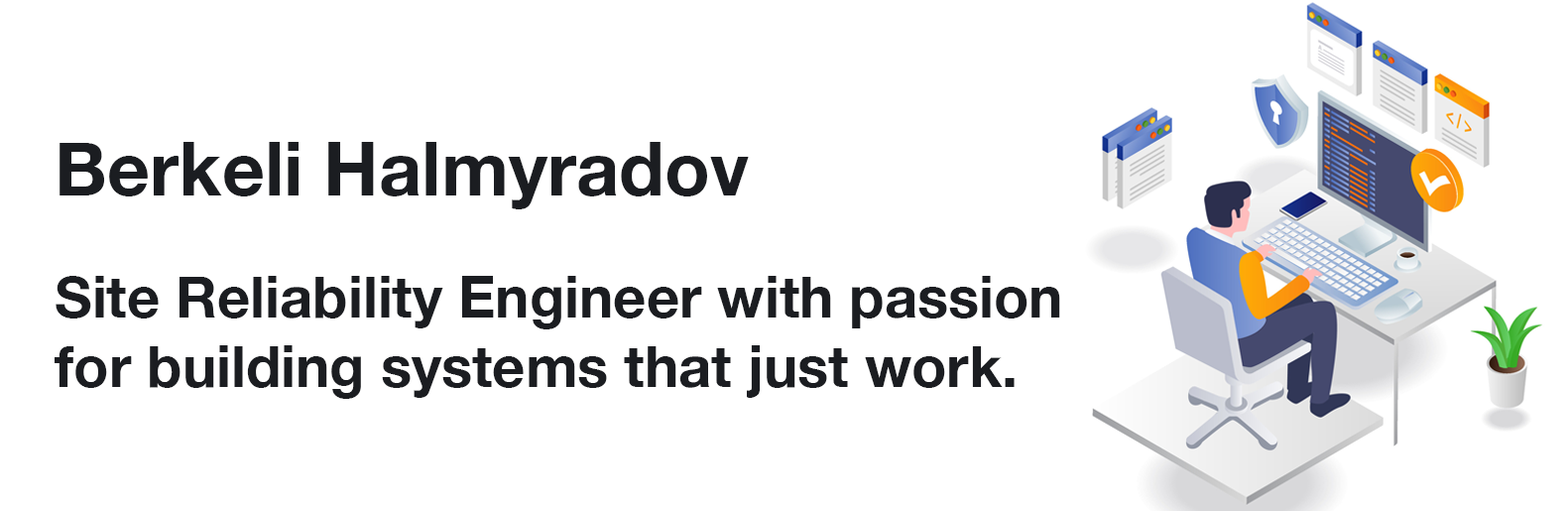
<style>
.page{position:relative;width:1568px;height:511px;background:#ffffff}
.page>*{position:absolute;margin:0}
.t1{font:74.5px "HelveticaNeue-Bold";color:#1b1d21}
.t2{font:57.4px "HelveticaNeue-Bold";color:#1b1d21}
</style>
<div class="page">
<p class="t1" style="left:60px;top:142px;width:689px;height:67px">Berkeli Halmyradov</p>
<p class="t2" style="left:55px;top:276px;width:1005px;height:123px">Site Reliability Engineer with passion <br>for building systems that just work.</p>
</div>
